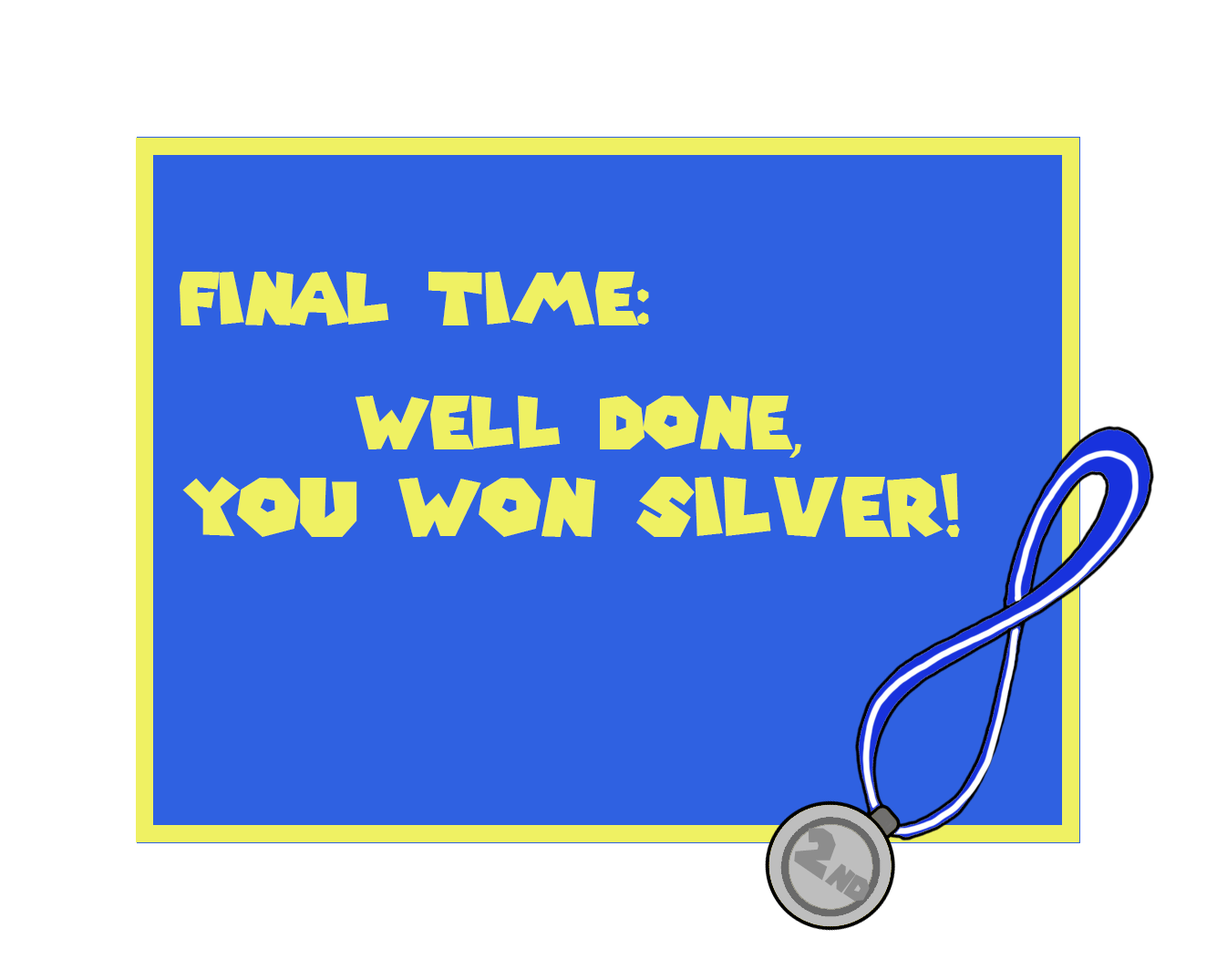
<style>
.page{position:relative;width:1217px;height:980px;background:#2f61e1}
.page>*{position:absolute;margin:0}
.t1{font:72.2px "SuperMarioGalaxy";color:#eff163}
.t2{font:79.8px/87.5px "SuperMarioGalaxy";color:#eff163}
.t3{font:72.2px/87.5px "SuperMarioGalaxy";color:#eff163}
.t4{font:32.9px "SuperMarioGalaxy";color:#8d8d8d}
.t5{font:58.7px "SuperMarioGalaxy";color:#8d8d8d}
</style>
<div class="page">
<p class="t1" style="left:180px;top:272px;width:469px;height:53px">final time:</p>
<p class="t2" style="left:182px;top:396px;width:778px;height:141px;text-align:center"><span class="t3">well done,<br></span>you won silver!</p>
<p class="t4" style="left:794px;top:828px;width:76px;height:74px;rotate:34deg"><span class="t5">2</span>nd</p>
</div>
